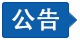
<style>
.page{position:relative;width:80px;height:40px;background:#0c5daa}
.page>*{position:absolute;margin:0}
.t1{font:24px "AdobeHeitiStd-Regular";letter-spacing:0.04em;color:#f8fafb}
</style>
<div class="page">
<p class="t1" style="left:12px;top:8px;width:47px;height:23px">公告</p>
</div>
